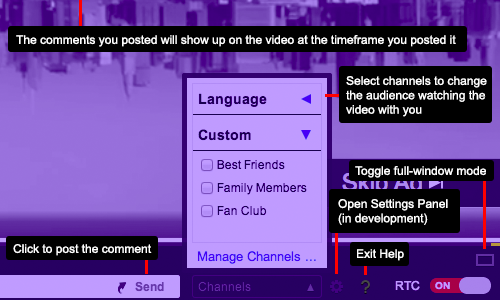
<style>
.page{position:relative;width:500px;height:300px}
.page>*{position:absolute;margin:0}
.t1{font:12px "ArialMT";color:#ffffff}
</style>
<div class="page">
<p class="t1" style="left:16px;top:35px;width:440px;height:12px">The comments you posted will show up on the video at the timeframe you posted it</p>
<p class="t1" style="left:346px;top:76px;width:141px;height:41px">Select channels to change<br>the audience watching the<br>video with you</p>
<p class="t1" style="left:355px;top:166px;width:131px;height:12px">Toggle full-window mode</p>
<p class="t1" style="left:338px;top:199px;width:110px;height:26px">Open Settings Panel<br>(in development)</p>
<p class="t1" style="left:13px;top:244px;width:139px;height:12px">Click to post the comment</p>
<p class="t1" style="left:357px;top:249px;width:47px;height:12px">Exit Help</p>
</div>
